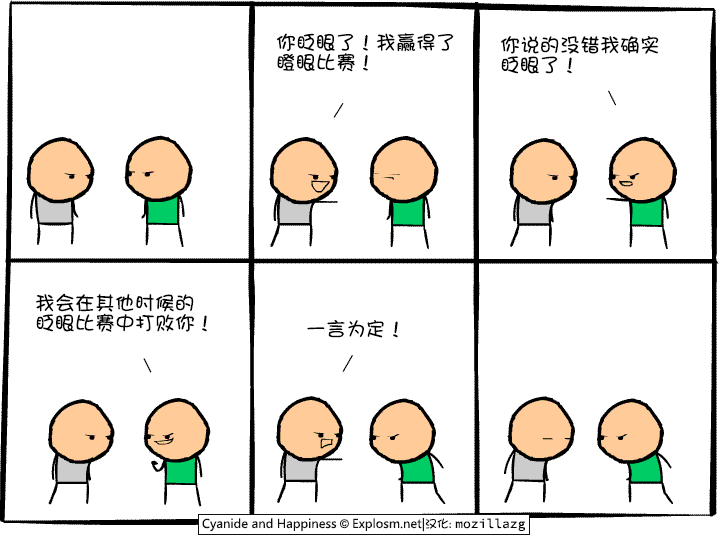
<style>
.page{position:relative;width:720px;height:550px;background:#ffffff}
.page>*{position:absolute;margin:0}
.t1{font:20px/20px "DFGirl";color:#000000}
.t2{font:20px "DFGirl";color:#000000}
</style>
<div class="page">
<p class="t1" style="left:276px;top:33px;width:178px;height:39px">你眨眼了！我赢得了<br>瞪眼比赛！</p>
<p class="t1" style="left:500px;top:36px;width:159px;height:38px">你说的没错我确实<br>眨眼了！</p>
<p class="t1" style="left:35px;top:293px;width:172px;height:39px">我会在其他时候的<br>眨眼比赛中打败你！</p>
<p class="t2" style="left:307px;top:319px;width:91px;height:19px">一言为定！</p>
</div>
